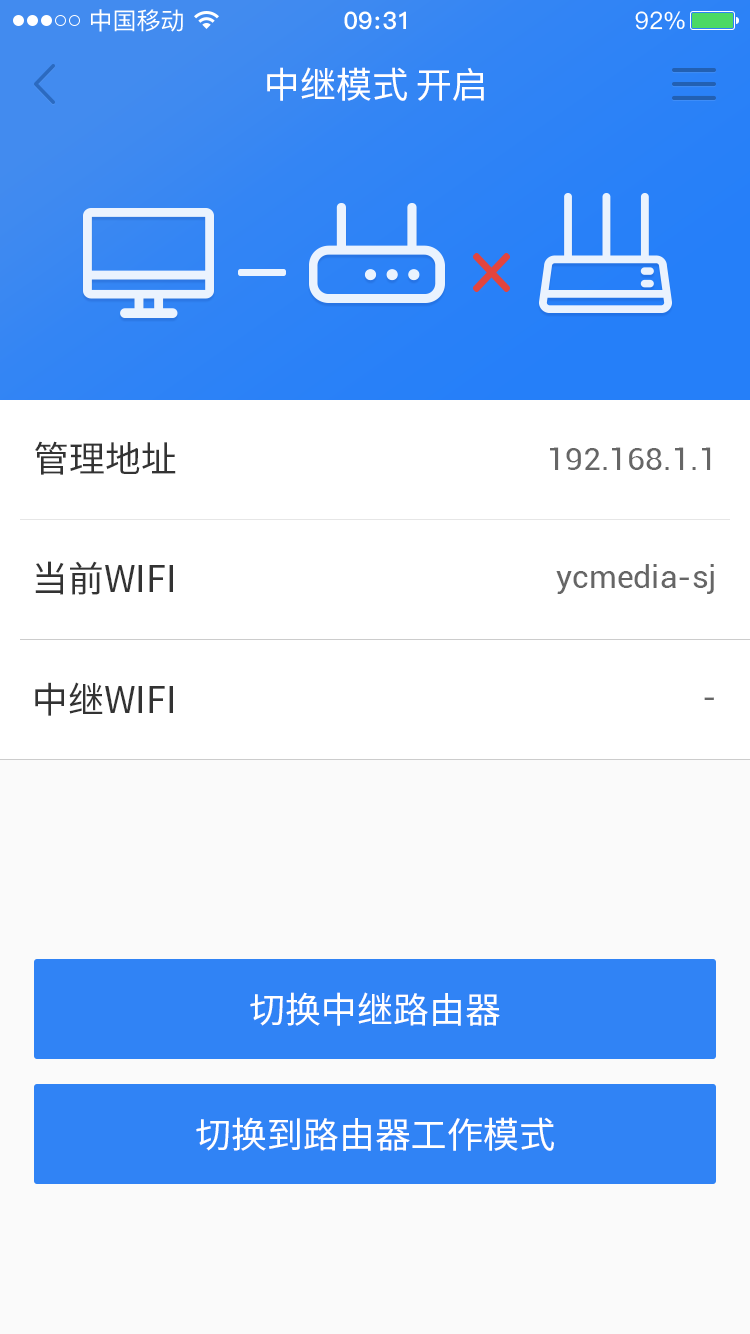
<style>
.page{position:relative;width:750px;height:1334px;background:#fafafa}
.page>*{position:absolute;margin:0}
.t1{font:36px "SourceHanSansCN-Regular";color:#ffffff}
.t2{font:36px "SourceHanSansCN-Regular";color:#333333}
.t3{font:32px "Roboto-Regular";color:#666666}
</style>
<div class="page">
<p class="t1" style="left:267px;top:67px;width:217px;height:34px">中继模式 开启</p>
<p class="t2" style="left:35px;top:441px;width:141px;height:34px">管理地址</p>
<p class="t3" style="left:550px;top:447px;width:161px;height:23px">192.168.1.1</p>
<p class="t2" style="left:35px;top:561px;width:138px;height:34px">当前WIFI</p>
<p class="t3" style="left:556px;top:564px;width:158px;height:30px">ycmedia-sj</p>
<p class="t2" style="left:35px;top:682px;width:138px;height:34px">中继WIFI</p>
<p class="t3" style="left:704px;top:697px;width:10px;height:3px">-</p>
<p class="t1" style="left:250px;top:992px;width:250px;height:34px">切换中继路由器</p>
<p class="t1" style="left:196px;top:1117px;width:358px;height:34px">切换到路由器工作模式</p>
</div>
